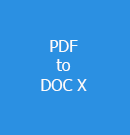
<style>
.page{position:relative;width:130px;height:135px;background:#2b90e2}
.page>*{position:absolute;margin:0}
.t1{font:12px "Tahoma";color:#fcfcfa}
</style>
<div class="page">
<p class="t1" style="left:41px;top:40px;width:46px;height:51px;text-align:center">PDF<br>to<br>DOC X</p>
</div>
